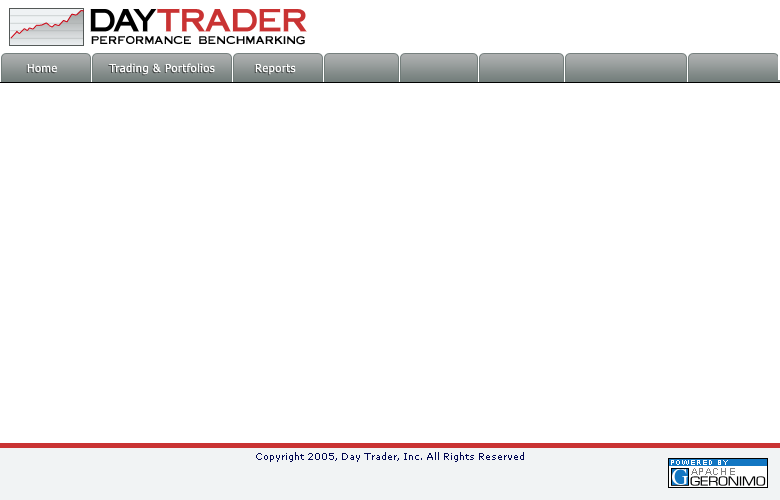
<style>
.page{position:relative;width:780px;height:500px;background:#ffffff}
.page>*{position:absolute;margin:0}
.t1{font:10.9px "ft20";letter-spacing:0.05em;color:#000000;text-transform:uppercase}
.t2{font:11px "Tahoma";letter-spacing:0.05em;color:#ffffff}
.t3{font:9px "Verdana";color:#000651}
</style>
<div class="page">
<p class="t1" style="left:91px;top:36px;width:214px;height:9px">Performance Benchmarking</p>
<p class="t2" style="left:27px;top:63px;width:269px;height:12px">Home             Trading &amp; Portfolios          Reports</p>
<p class="t3" style="left:256px;top:452px;width:268px;height:10px">Copyright 2005, Day Trader, Inc. All Rights Reserved</p>
</div>
